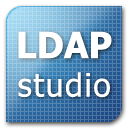
<style>
.page{position:relative;width:128px;height:128px}
.page>*{position:absolute;margin:0}
.t1{font:32px "Tahoma";letter-spacing:0.05em;color:#ffffff}
.t2{font:36px "Tahoma-Bold";color:#ffffff}
</style>
<div class="page">
<p class="t1" style="left:18px;top:31px;width:94px;height:67px;text-align:center"><span class="t2">LDAP<br></span>studio</p>
</div>
